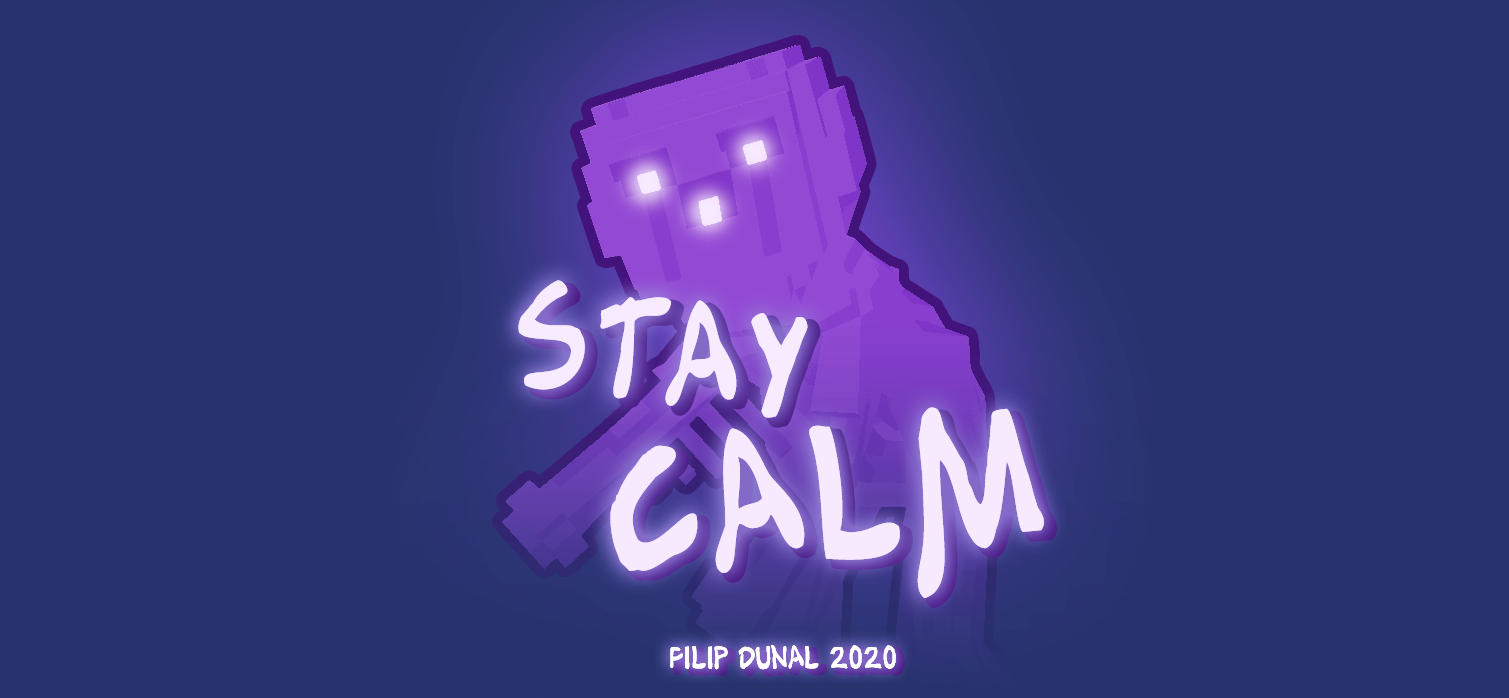
<style>
.page{position:relative;width:1509px;height:698px;background:#26336d}
.page>*{position:absolute;margin:0}
.t1{font:132px "AlexToth";color:#f7ebff;scale:0.83 1}
.t2{font:174.2px "AlexToth";color:#f7eaff;scale:0.83 1}
.t3{font:28.7px "AlexToth";color:#ffffff;scale:0.83 1}
</style>
<div class="page">
<p class="t1" style="left:518px;top:280px;width:290px;height:138px;rotate:7deg">STAY</p>
<p class="t2" style="left:610px;top:407px;width:434px;height:192px;rotate:-6deg">CALM</p>
<p class="t3" style="left:670px;top:645px;width:226px;height:25px">filip dunal 2020</p>
</div>
